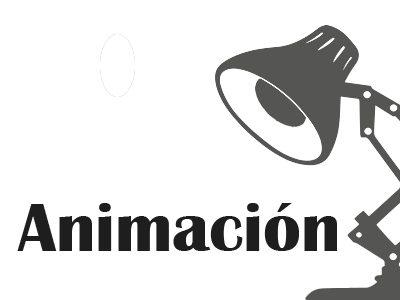
<style>
.page{position:relative;width:400px;height:300px;background:#ffffff}
.page>*{position:absolute;margin:0}
.t1{font:70px "BritannicBold";color:#1e1e1e}
</style>
<div class="page">
<p class="t1" style="left:17px;top:203px;width:320px;height:48px">Animación</p>
</div>
